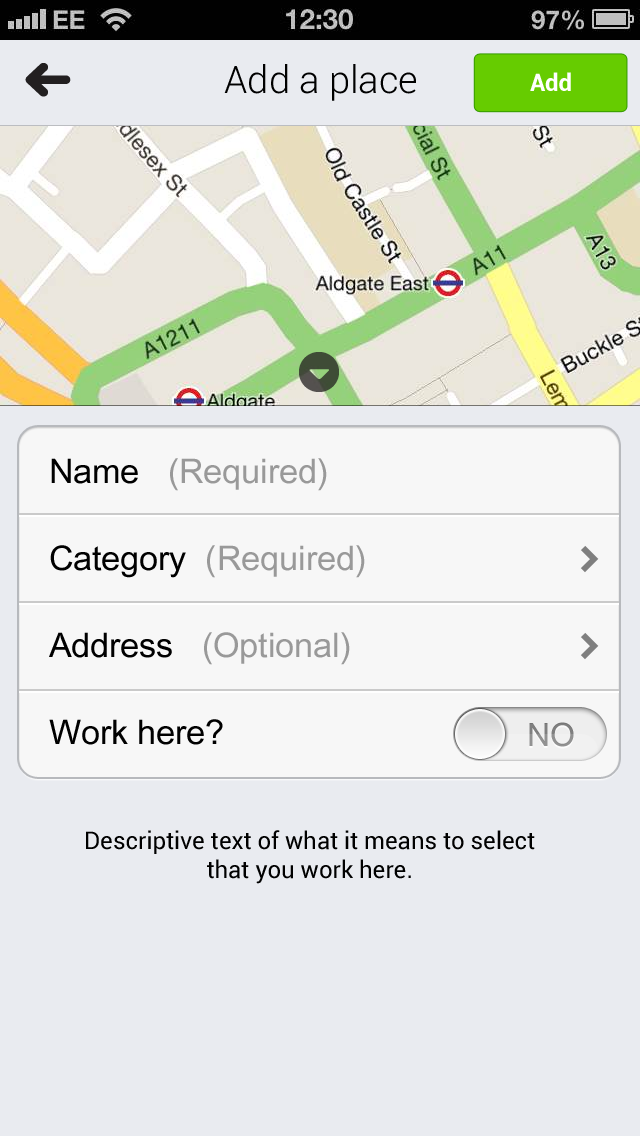
<style>
.page{position:relative;width:640px;height:1136px;background:#e9ebf0}
.page>*{position:absolute;margin:0}
.t1{font:38px "Roboto-Light";color:#000000}
.t2{font:24px "Roboto-Bold";color:#ffffff}
.t3{font:34px/87px "ArialUnicodeMS";color:#999999}
.t4{font:34px/87px "ArialUnicodeMS";color:#000000}
.t5{font:32px "ArialUnicodeMS";color:#7f7f7f}
.t6{font:24px "Roboto-Regular";color:#000000}
</style>
<div class="page">
<p class="t1" style="left:224px;top:64px;width:192px;height:37px">Add a place</p>
<p class="t2" style="left:530px;top:72px;width:41px;height:19px">Add</p>
<p class="t3" style="left:49px;top:458px;width:316px;height:287px"><span class="t4">Name   </span>(Required)<br><span class="t4">Category </span> (Required)<br><span class="t4">Address  </span> (Optional)<br><span class="t4">Work here?</span></p>
<p class="t5" style="left:529px;top:722px;width:45px;height:25px">NO</p>
<p class="t6" style="left:86px;top:830px;width:449px;height:54px;text-align:center">Descriptive text of what it means to select that you work here.</p>
</div>
